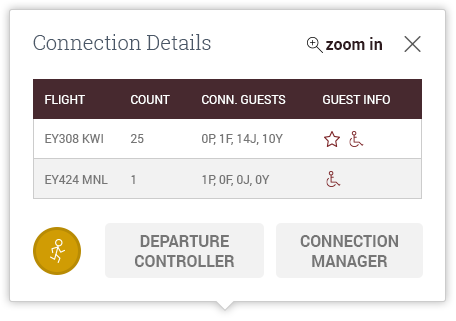
<style>
.page{position:relative;width:456px;height:321px;background:#ffffff}
.page>*{position:absolute;margin:0}
.t1{font:20px "RobotoSlab-Light";color:#4a5767}
.t2{font:16px "Roboto-Bold";color:#2e1b1f}
.t3{font:12px "Roboto-Regular";color:#ffffff;text-transform:uppercase}
.t4{font:12px "Roboto-Regular";color:#767676;text-transform:uppercase}
.t5{font:16px "Roboto-Bold";color:#767676;text-transform:uppercase}
</style>
<div class="page">
<p class="t1" style="left:33px;top:34px;width:178px;height:16px">Connection Details</p>
<p class="t2" style="left:326px;top:37px;width:56px;height:13px">zoom in</p>
<p class="t3" style="left:45px;top:95px;width:40px;height:9px">Flight</p>
<p class="t3" style="left:131px;top:95px;width:39px;height:9px">Count</p>
<p class="t3" style="left:202px;top:95px;width:84px;height:9px">Conn. Guests</p>
<p class="t3" style="left:323px;top:95px;width:67px;height:9px">Guest Info</p>
<p class="t4" style="left:45px;top:134px;width:58px;height:9px">EY308 KWI</p>
<p class="t4" style="left:130px;top:134px;width:14px;height:9px">25</p>
<p class="t4" style="left:202px;top:134px;width:81px;height:11px">0P, 1F, 14J, 10Y</p>
<p class="t4" style="left:45px;top:175px;width:63px;height:9px">EY424 mnl</p>
<p class="t4" style="left:131px;top:175px;width:4px;height:9px">1</p>
<p class="t4" style="left:202px;top:175px;width:68px;height:11px">1P, 0F, 0J, 0Y</p>
<p class="t5" style="left:135px;top:235px;width:100px;height:32px;text-align:center">Departure<br>Controller</p>
<p class="t5" style="left:300px;top:235px;width:98px;height:32px;text-align:center">Connection<br>Manager</p>
</div>
